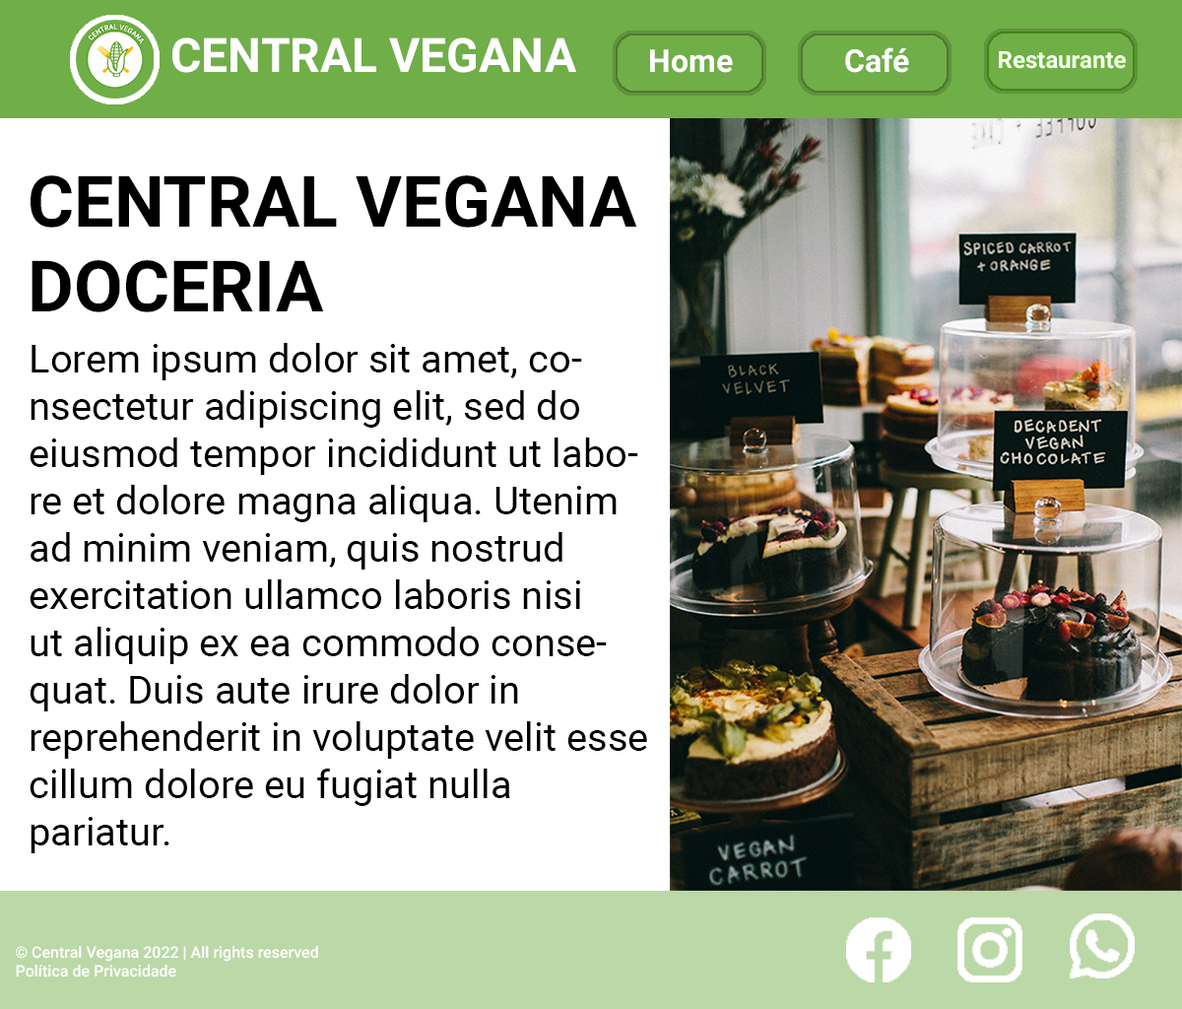
<style>
.page{position:relative;width:1182px;height:1009px;background:#ffffff}
.page>*{position:absolute;margin:0}
.t1{font:47.3px "Roboto-Bold";color:#ffffff}
.t2{font:31.5px "Roboto-Bold";color:#ffffff}
.t3{font:23.6px "Roboto-Bold";color:#ffffff}
.t4{font:70.9px "Roboto-Bold";color:#000000}
.t5{font:39.4px "Roboto-Regular";color:#000000}
.t6{font:15.8px "Roboto-Medium";color:#ffffff}
</style>
<div class="page">
<p class="t1" style="left:172px;top:37px;width:404px;height:36px">CENTRAL VEGANA</p>
<p class="t2" style="left:650px;top:49px;width:83px;height:24px">Home</p>
<p class="t2" style="left:845px;top:47px;width:64px;height:26px">Café</p>
<p class="t3" style="left:999px;top:51px;width:127px;height:18px">Restaurante</p>
<p class="t4" style="left:31px;top:175px;width:606px;height:137px">CENTRAL VEGANA <br>DOCERIA</p>
<p class="t5" style="left:30px;top:343px;width:617px;height:510px">Lorem ipsum dolor sit amet, co-<br>nsectetur adipiscing elit, sed do<br>eiusmod tempor incididunt ut labo-<br>re et dolore magna aliqua. Utenim <br>ad minim veniam, quis nostrud <br>exercitation ullamco laboris nisi <br>ut aliquip ex ea commodo conse-<br>quat. Duis aute irure dolor in <br>reprehenderit in voluptate velit esse <br>cillum dolore eu fugiat nulla <br>pariatur.</p>
<p class="t6" style="left:16px;top:945px;width:302px;height:32px">© Central Vegana 2022 | All rights reserved<br>Política de Privacidade</p>
</div>
